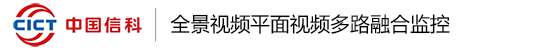
<style>
.page{position:relative;width:541px;height:50px;background:#ffffff}
.page>*{position:absolute;margin:0}
.t1{font:20px "MicrosoftYaHei";color:#000000}
</style>
<div class="page">
<p class="t1" style="left:170px;top:14px;width:280px;height:20px">全景视频平面视频多路融合监控</p>
</div>
